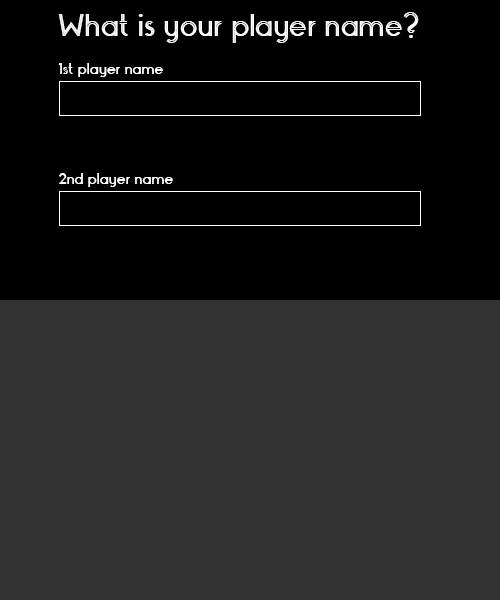
<style>
.page{position:relative;width:500px;height:600px;background:#333333}
.page>*{position:absolute;margin:0}
.t1{font:36px "Monopoly-Inline";color:#ffffff}
.t2{font:18px "Monopoly-Inline";color:#ffffff}
</style>
<div class="page">
<p class="t1" style="left:58px;top:12px;width:361px;height:31px">What is your player name?</p>
<p class="t2" style="left:58px;top:63px;width:105px;height:14px">1st player name</p>
<p class="t2" style="left:59px;top:173px;width:114px;height:14px">2nd player name</p>
</div>
